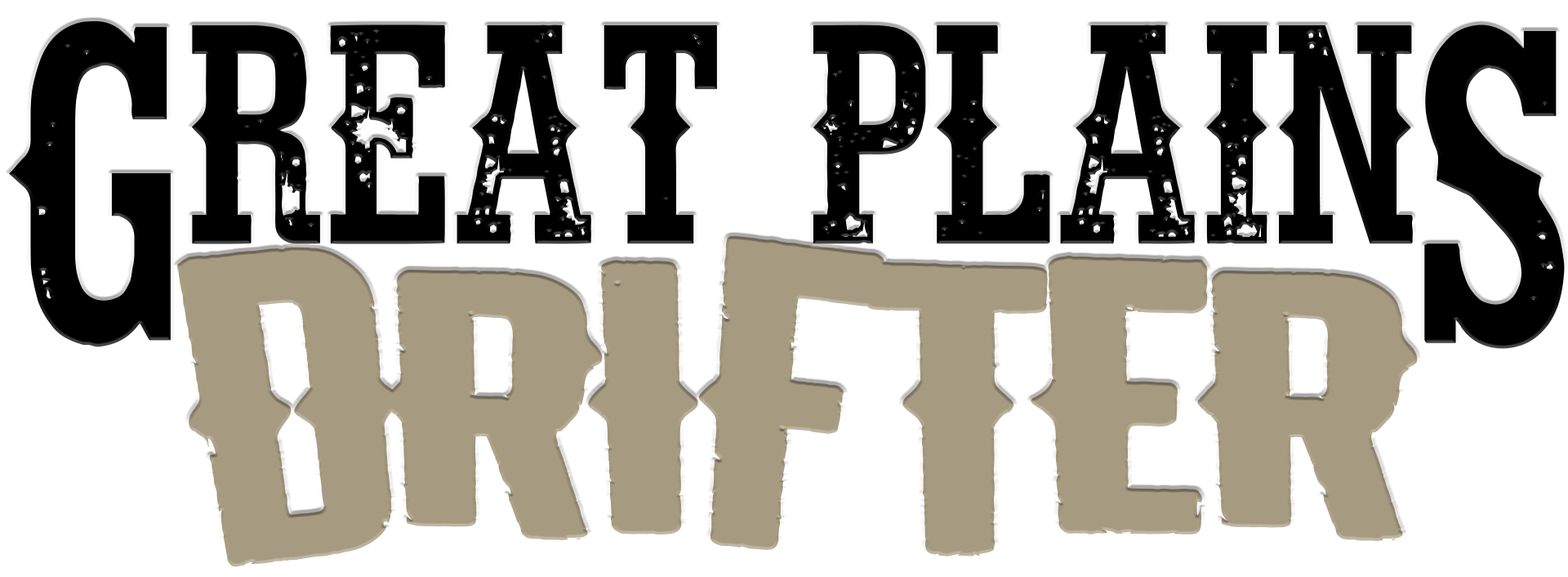
<style>
.page{position:relative;width:1568px;height:577px;background:#ffffff}
.page>*{position:absolute;margin:0}
.t1{font:489.4px "FortDeath";color:#000000}
.t2{font:340.1px "FortDeath";color:#000000}
.t3{font:487px "FortDeath";color:#000000}
.t4{font:397.4px "BlinkKiss";color:#a69a80;scale:1.22 1}
.t5{font:392.1px "BlinkKiss";color:#a69a80;scale:1.22 1}
.t6{font:400.9px "BlinkKiss";color:#a69a80;scale:1.22 1}
</style>
<div class="page">
<p class="t1" style="left:9px;top:21px;width:162px;height:326px">G</p>
<p class="t2" style="left:191px;top:24px;width:1222px;height:220px">reat plain</p>
<p class="t3" style="left:1424px;top:24px;width:141px;height:325px">S</p>
<p class="t4" style="left:698px;top:235px;width:186px;height:315px;rotate:5deg">F</p>
<p class="t5" style="left:177px;top:247px;width:224px;height:320px;rotate:-7deg">D</p>
<p class="t6" style="left:864px;top:255px;width:554px;height:301px">TER</p>
<p class="t6" style="left:382px;top:260px;width:316px;height:280px">RI</p>
</div>
